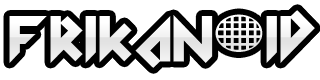
<style>
.page{position:relative;width:320px;height:80px;background:#ffffff}
.page>*{position:absolute;margin:0}
.t1{font:53px "ArkanoidSolid";color:#f2f2f2}
.t2{font:66px "ArkanoidSolid";color:#f2f2f2}
</style>
<div class="page">
<p class="t1" style="left:9px;top:10px;width:306px;height:58px">FRIKAN<span class="t2">1</span>ID</p>
</div>
